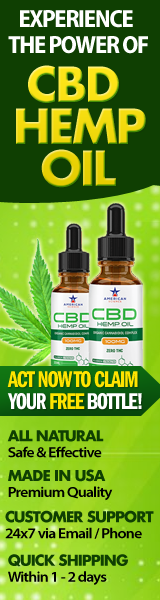
<style>
.page{position:relative;width:160px;height:600px;background:#0f3f02}
.page>*{position:absolute;margin:0}
.t1{font:25px/26px "MyriadPro-BoldSemiCn";letter-spacing:-0.05em;color:#ffffff;text-transform:uppercase}
.t2{font:47px/42px "FuturaLT-Bold";letter-spacing:-0.05em}
.t3{font:23.4px/22px "FranklinGothicLT-DemiCmpr";letter-spacing:-0.05em;color:#ffe400;text-transform:uppercase}
.t4{font:23.4px/22px "FranklinGothicLT-DemiCmpr";letter-spacing:-0.05em;color:#ffffff;text-transform:uppercase}
.t5{font:14.6px/16px "MyriadPro-SemiboldSemiExt";letter-spacing:-0.05em;color:#000000}
.t6{font:14.7px/16px "FuturaLT-Bold";letter-spacing:-0.05em;color:#0f3f02}
</style>
<div class="page">
<p class="t1" style="left:8px;top:10px;width:140px;height:44px">Experience<br>The Power Of</p>
<p class="t2" style="left:16px;top:65px;width:130px;height:123px">CBD <br>HEMP<br>  OIL</p>
<p class="t3" style="left:7px;top:371px;width:135px;height:39px">Act Now To Claim <br><span class="t4">Your </span>Free<span class="t4"> Bottle!</span></p>
<p class="t5" style="left:7px;top:430px;width:97px;height:28px"><span class="t6">ALL NATURAL<br></span>Safe &amp; Effective</p>
<p class="t5" style="left:8px;top:469px;width:105px;height:32px"><span class="t6">MADE IN USA<br></span>Premium Quality</p>
<p class="t5" style="left:5px;top:510px;width:149px;height:29px"><span class="t6">CUSTOMER SUPPORT<br></span>24x7 via Email / Phone</p>
<p class="t5" style="left:8px;top:554px;width:120px;height:31px"><span class="t6">QUICK SHIPPING<br></span>Within 1 - 2 days</p>
</div>
